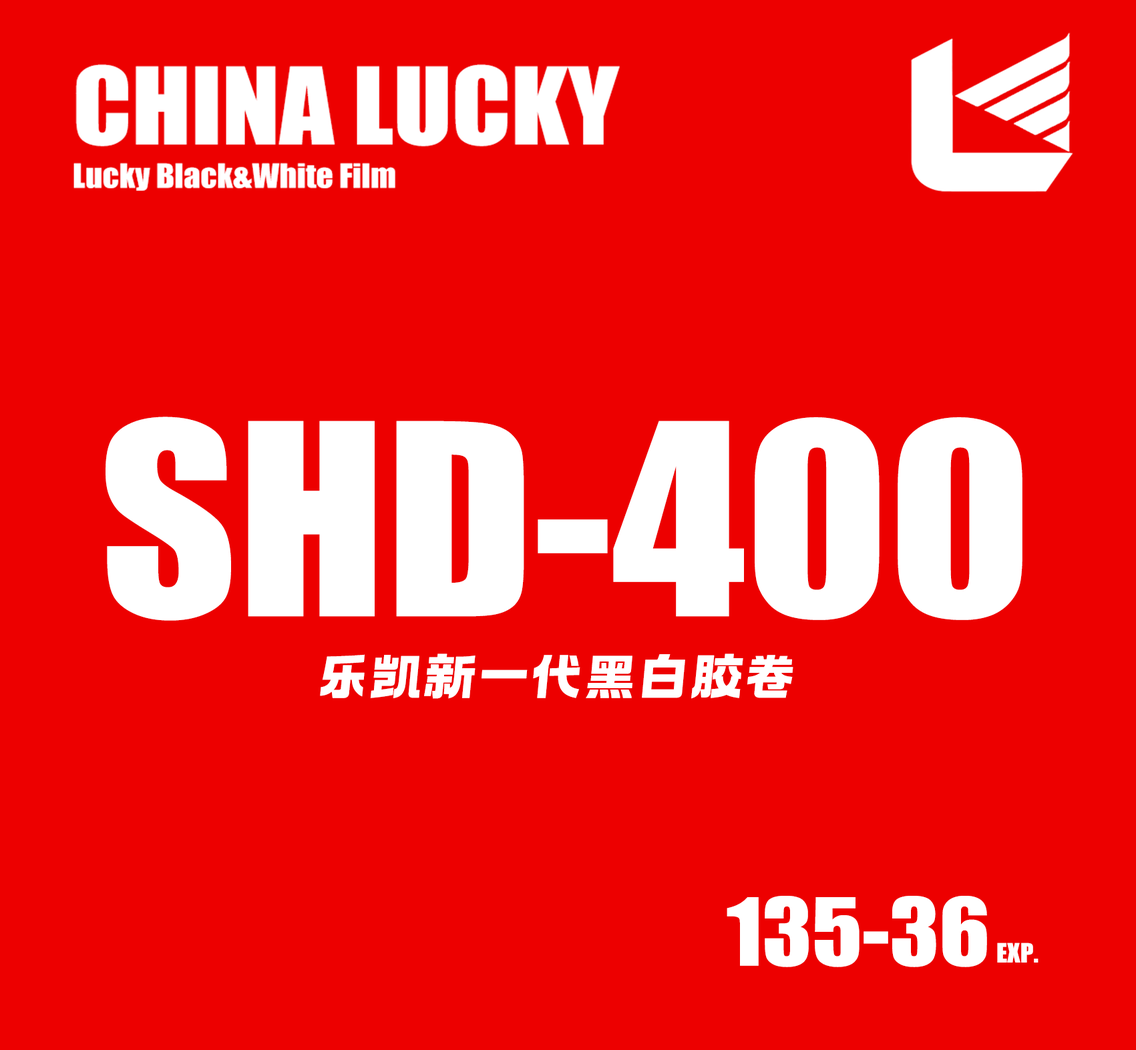
<style>
.page{position:relative;width:1136px;height:1050px;background:#ed0000}
.page>*{position:absolute;margin:0}
.t1{font:246.9px "Impact";color:#ffffff;scale:1.08 1}
.t2{font:49.4px "YEFONTAoYeHei-Regular";color:#ffffff;scale:1.08 1}
.t3{font:86.4px "Impact";color:#ffffff;scale:1.08 1}
.t4{font:24.7px "Impact";color:#ffffff;scale:1.08 1}
</style>
<div class="page">
<p class="t1" style="left:105px;top:417px;width:917px;height:204px">SHD-400</p>
<p class="t2" style="left:320px;top:654px;width:473px;height:45px">乐凯新一代黑白胶卷</p>
<p class="t3" style="left:726px;top:896px;width:261px;height:71px">135-36</p>
<p class="t4" style="left:997px;top:943px;width:41px;height:20px">EXP.</p>
</div>
